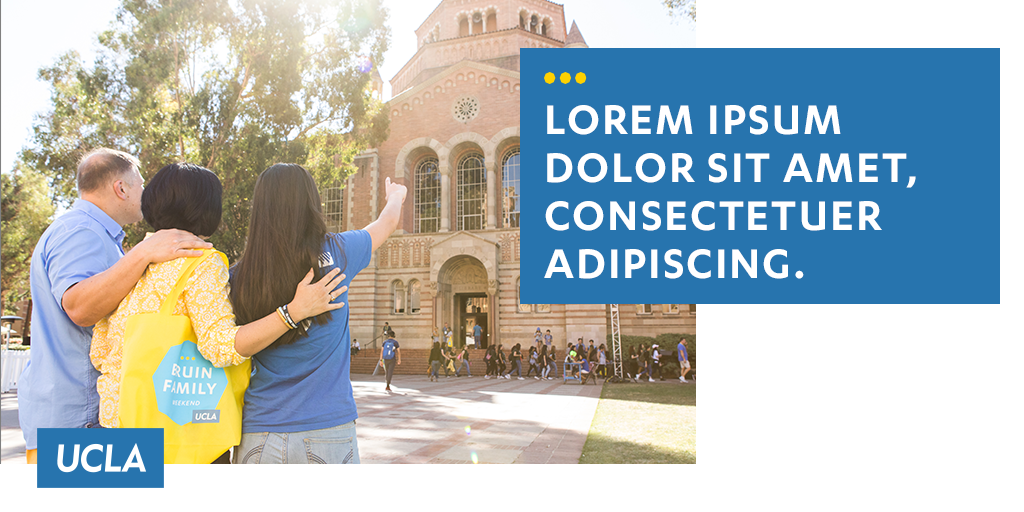
<style>
.page{position:relative;width:1024px;height:512px;background:#ffffff}
.page>*{position:absolute;margin:0}
.t1{font:48px/48px "Karbon-Semibold";letter-spacing:0.04em;color:#ffffff;text-transform:uppercase}
</style>
<div class="page">
<p class="t1" style="left:544px;top:105px;width:372px;height:174px">Lorem ipsum dolor sit amet, consectetuer adipiscing.</p>
</div>
